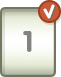
<style>
.page{position:relative;width:61px;height:77px}
.page>*{position:absolute;margin:0}
.t1{font:30px "RotondaC-Bold";letter-spacing:0.04em;color:#828282;text-transform:uppercase}
</style>
<div class="page">
<p class="t1" style="left:23px;top:31px;width:9px;height:21px">1</p>
</div>
